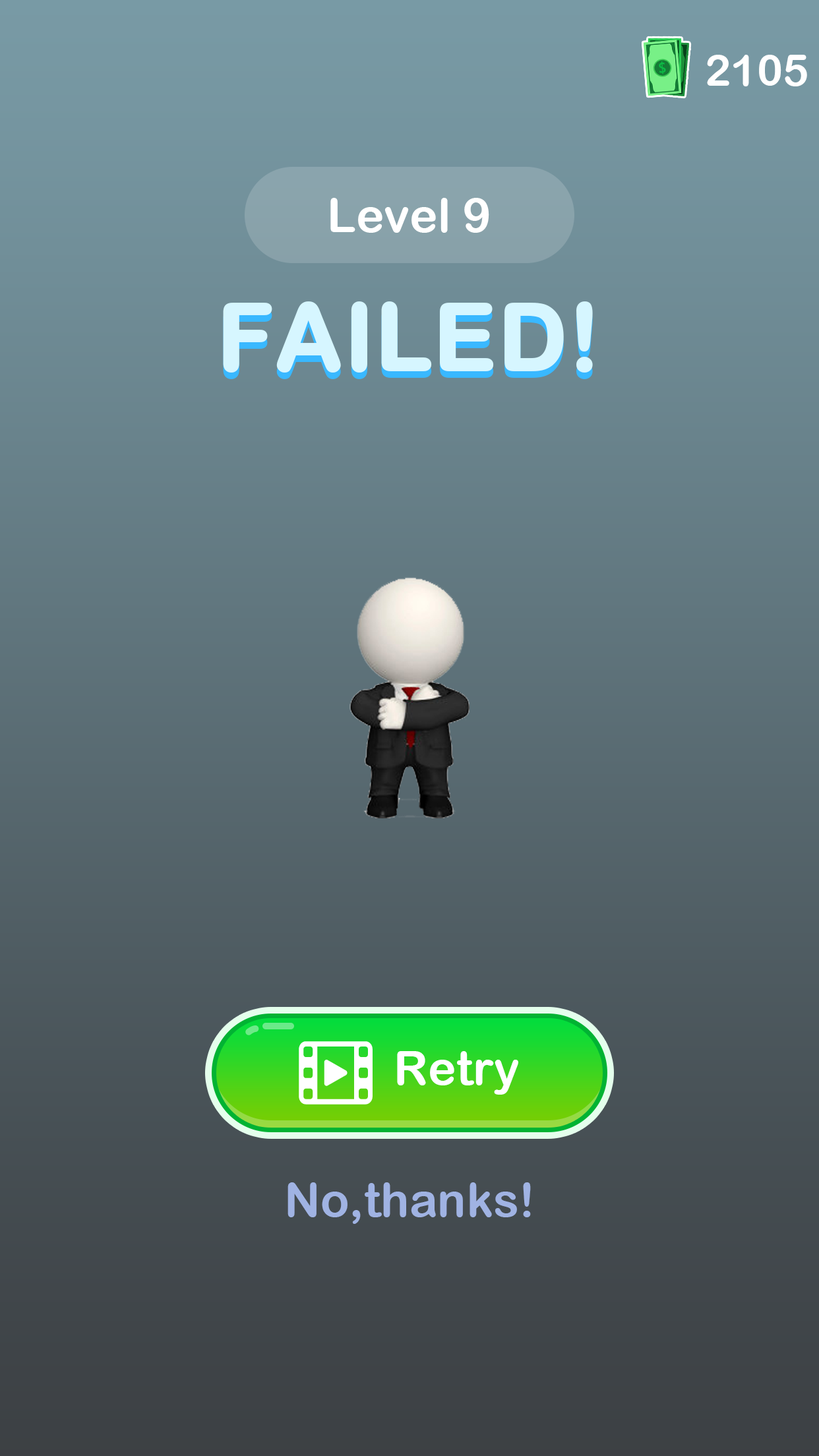
<style>
.page{position:relative;width:819px;height:1456px}
.page>*{position:absolute;margin:0}
.t1{font:43.5px "ArialRoundedMTBold";color:#ffffff}
.t2{font:47.5px "ArialRoundedMTBold";color:#ffffff}
.t3{font:92.3px "ArialRoundedMTBold";color:#d6f6ff;font-weight:bold}
.t4{font:47.5px "ArialRoundedMTBold";color:#a0b3e3}
</style>
<div class="page">
<p class="t1" style="left:707px;top:55px;width:100px;height:31px">2105</p>
<p class="t2" style="left:330px;top:198px;width:159px;height:35px">Level 9</p>
<p class="t3" style="left:223px;top:301px;width:370px;height:72px">FAILED!</p>
<p class="t2" style="left:397px;top:1051px;width:121px;height:44px">Retry</p>
<p class="t4" style="left:288px;top:1182px;width:243px;height:42px">No,thanks!</p>
</div>
